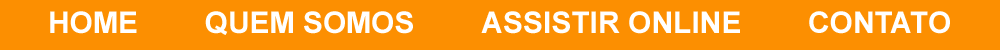
<style>
.page{position:relative;width:1000px;height:50px;background:#fc8f01}
.page>*{position:absolute;margin:0}
.t1{font:30px "Arial-BoldMT";color:#ffffff}
.t2{font:17px "ArialMT";color:#ffffff}
</style>
<div class="page">
<p class="t1" style="left:50px;top:11px;width:900px;height:24px"><span class="t2">        </span>HOME        QUEM SOMOS        ASSISTIR ONLINE        CONTATO</p>
</div>
